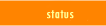
<style>
.page{position:relative;width:106px;height:26px;background:#ff8400}
.page>*{position:absolute;margin:0}
.t1{font:14px "TwCenMT-CondensedMedium";color:#ffff99;font-weight:bold}
</style>
<div class="page">
<p class="t1" style="left:27px;top:2px;width:67px;height:22px">status</p>
</div>
